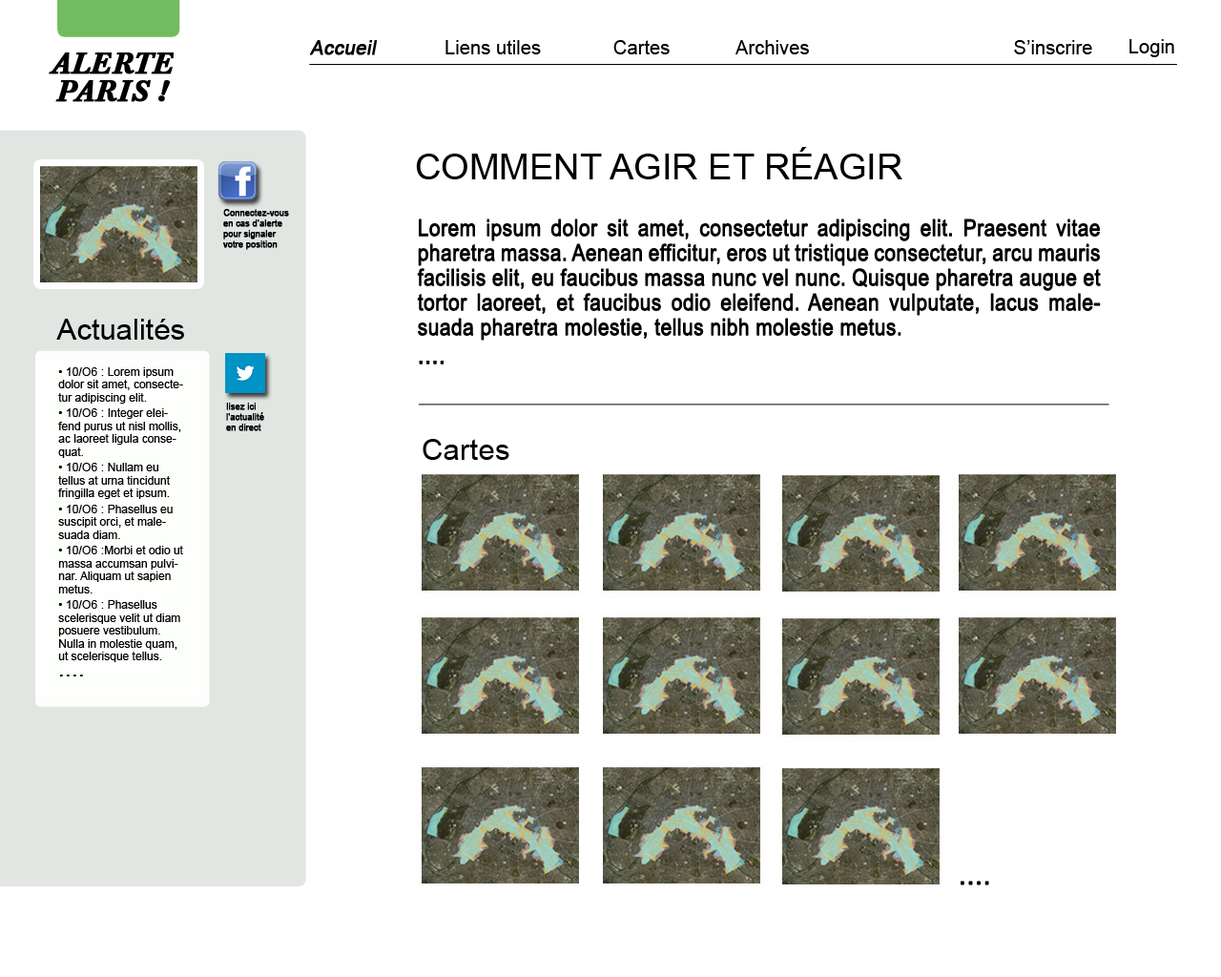
<style>
.page{position:relative;width:1221px;height:977px;background:#ffffff}
.page>*{position:absolute;margin:0}
.t1{font:19px "ArialMT";color:#000100;font-weight:bold;font-style:italic}
.t2{font:19px "ArialMT";color:#000100}
.t3{font:29.6px/27.7px "BaskervilleBE-MediumItalic";color:#000000;text-transform:uppercase;font-weight:bold}
.t4{font:36.2px "ArialMT";color:#010000;text-transform:uppercase}
.t5{font:8.6px/10.5px "ArialMT";color:#000000;font-weight:bold}
.t6{font:22.9px/24.8px "ArialMT";color:#010000;font-weight:bold;scale:0.87 1}
.t7{font:26.7px/28.6px "ArialMT";color:#010000;font-weight:bold;scale:0.87 1}
.t8{font:29.6px "ArialMT";color:#010000}
.t9{font:11.4px/12.9px "ArialMT";color:#020000}
.t10{font:11.4px/12.9px "ArialMT";letter-spacing:0.01em;color:#020000}
.t11{font:22.9px/12.9px "ArialMT";letter-spacing:0.01em;color:#020000}
.t12{font:29.6px "ArialMT";color:#000100}
.t13{font:26.7px "ArialMT";color:#010000;font-weight:bold}
</style>
<div class="page">
<p class="t1" style="left:309px;top:40px;width:69px;height:15px">Accueil</p>
<p class="t2" style="left:445px;top:40px;width:96px;height:14px">Liens utiles</p>
<p class="t2" style="left:613px;top:40px;width:57px;height:14px">Cartes</p>
<p class="t2" style="left:735px;top:40px;width:74px;height:14px">Archives</p>
<p class="t2" style="left:1014px;top:40px;width:78px;height:14px">S’inscrire</p>
<p class="t2" style="left:1129px;top:39px;width:45px;height:18px">Login</p>
<p class="t3" style="left:49px;top:52px;width:125px;height:50px;text-align:center">Alerte <br>Paris !</p>
<p class="t4" style="left:416px;top:147px;width:486px;height:32px">Comment Agir et réagir</p>
<p class="t5" style="left:223px;top:209px;width:66px;height:41px">Connectez-vous <br>en cas d’alerte <br>pour signaler <br>votre position</p>
<p class="t6" style="left:417px;top:218px;width:684px;height:146px;text-align:justify">Lorem ipsum dolor sit amet, consectetur adipiscing elit. Praesent vitae pharetra massa. Aenean efficitur, eros ut tristique consectetur, arcu mauris facilisis elit, eu faucibus massa nunc vel nunc. Quisque pharetra augue et tortor laoreet, et faucibus odio eleifend. Aenean vulputate, lacus malesuada pharetra molestie, tellus nibh molestie metus. <br><span class="t7">....</span></p>
<p class="t8" style="left:56px;top:319px;width:128px;height:21px">Actualités</p>
<p class="t9" style="left:58px;top:367px;width:125px;height:309px"><span class="t10">• 10/O6 : </span>Lorem ipsum dolor sit amet, consectetur adipiscing elit. <br><span class="t10">• 10/O6 : </span>Integer eleifend purus ut nisl mollis, ac laoreet ligula consequat. <br><span class="t10">• 10/O6 : </span>Nullam eu tellus at urna tincidunt fringilla eget et ipsum. <br><span class="t10">• 10/O6 : </span>Phasellus eu suscipit orci, et malesuada diam. <br><span class="t10">• 10/O6 :</span>Morbi et odio ut massa accumsan pulvinar. Aliquam ut sapien metus. <br><span class="t10">• 10/O6 : </span>Phasellus scelerisque velit ut diam posuere vestibulum. Nulla in molestie quam, ut scelerisque tellus. <br><span class="t11">....</span></p>
<p class="t5" style="left:226px;top:403px;width:38px;height:28px">lisez ici <br>l’actualité<br>en direct</p>
<p class="t12" style="left:423px;top:439px;width:86px;height:21px">Cartes</p>
<p class="t13" style="left:960px;top:880px;width:29px;height:5px">....</p>
</div>
